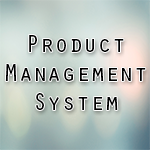
<style>
.page{position:relative;width:150px;height:150px}
.page>*{position:absolute;margin:0}
.t1{font:24.2px "OratorStd";color:#000000}
</style>
<div class="page">
<p class="t1" style="left:5px;top:35px;width:141px;height:75px;text-align:center">Product<br>Management<br>System</p>
</div>
